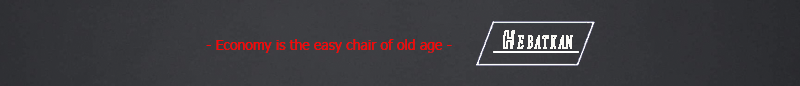
<style>
.page{position:relative;width:800px;height:86px}
.page>*{position:absolute;margin:0}
.t1{font:19.8px "ChaparralPro-Italic";color:#faf9f5;font-weight:bold;scale:0.5 1}
.t2{font:19.8px "TRON";color:#faf9f5;font-weight:bold;font-style:italic;scale:0.5 1}
.t3{font:14px "Tahoma";color:#fd0303}
</style>
<div class="page">
<p class="t1" style="left:503px;top:30px;width:70px;height:19px"><span class="t2">H </span>E B A T K A N</p>
<p class="t3" style="left:206px;top:39px;width:246px;height:14px">- Economy is the easy chair of old age -</p>
</div>
